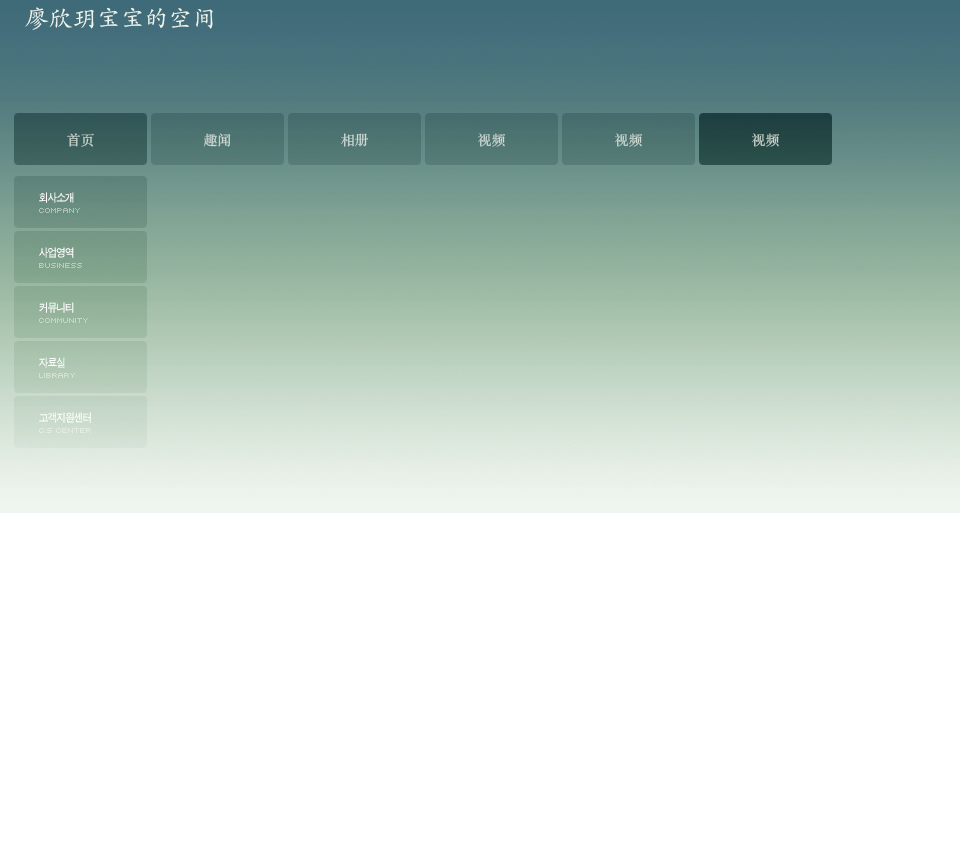
<style>
.page{position:relative;width:960px;height:850px;background:#ffffff}
.page>*{position:absolute;margin:0}
.t1{font:24px "STKaiti-SC-Regular";color:#eff5ef}
.t2{font:14px "STSongti-SC-Regular";color:#cbd6d0}
.t3{font:14px "STSongti-SC-Regular";color:#cfd9d4}
.t4{font:14px "STSongti-SC-Regular";color:#ced9d4}
.t5{font:14px "STSongti-SC-Regular";color:#c9d2cd}
.t6{font:11.5px/55px "SandTg";letter-spacing:-0.05em;color:#ffffff;scale:0.9 1}
</style>
<div class="page">
<p class="t1" style="left:25px;top:7px;width:188px;height:23px">廖欣玥宝宝的空间</p>
<p class="t2" style="left:67px;top:133px;width:27px;height:14px">首页</p>
<p class="t3" style="left:204px;top:133px;width:27px;height:14px">趣闻</p>
<p class="t4" style="left:341px;top:133px;width:27px;height:14px">相册</p>
<p class="t4" style="left:478px;top:133px;width:27px;height:14px">视频</p>
<p class="t4" style="left:615px;top:133px;width:27px;height:14px">视频</p>
<p class="t5" style="left:752px;top:133px;width:27px;height:14px">视频</p>
<p class="t6" style="left:39px;top:192px;width:52px;height:231px">회사소개<br>사업영역<br>커뮤니티<br>자료실<br>고객지원센터</p>
</div>
